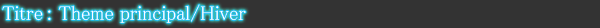
<style>
.page{position:relative;width:600px;height:28px;background:#333333}
.page>*{position:absolute;margin:0}
.t1{font:20px "MS-PMincho";color:#ffffff}
</style>
<div class="page">
<p class="t1" style="left:2px;top:4px;width:244px;height:19px">Titre : Theme principal/Hiver</p>
</div>
